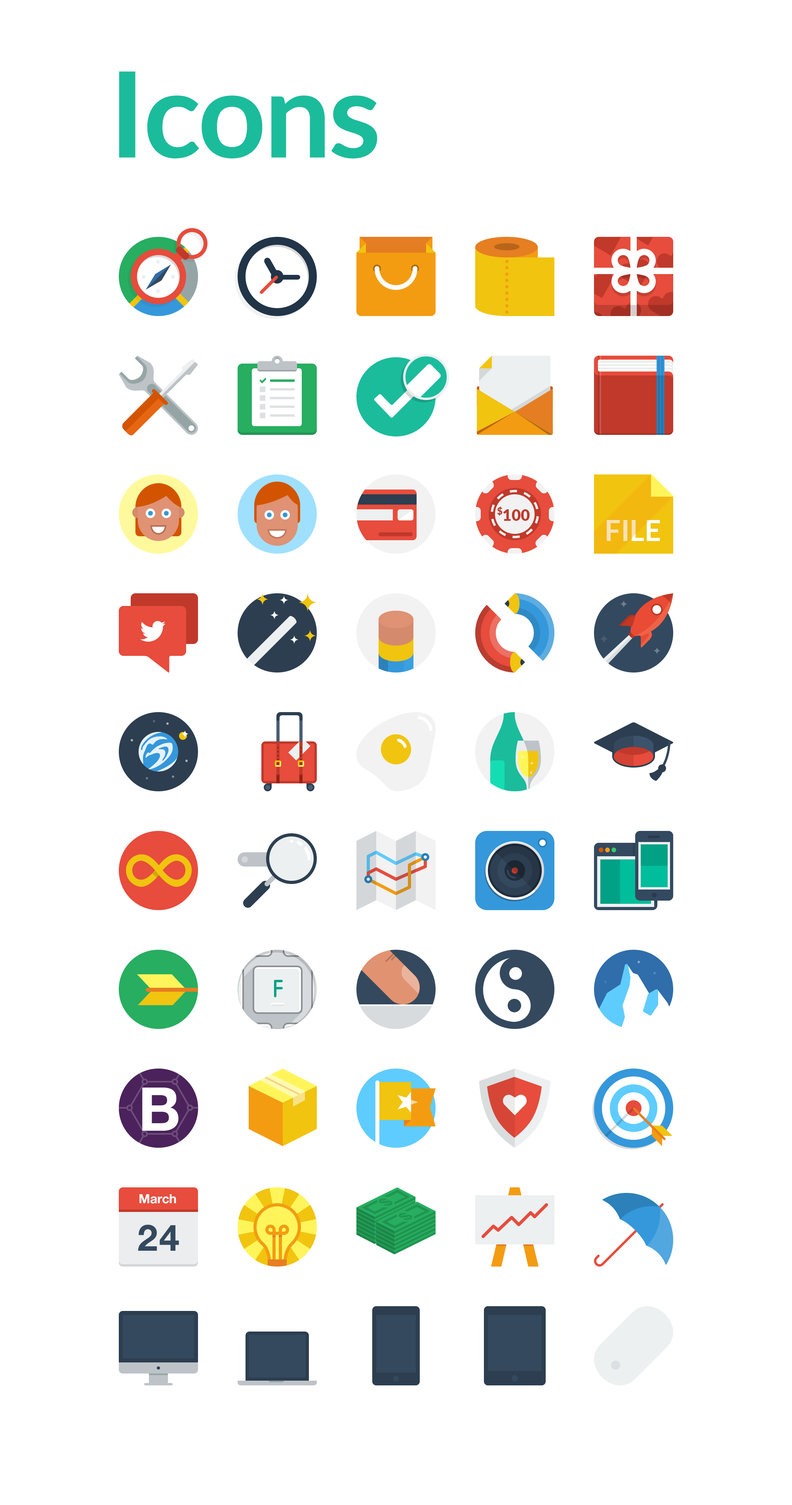
<style>
.page{position:relative;width:792px;height:1505px;background:#ffffff}
.page>*{position:absolute;margin:0}
.t1{font:118.8px "Lato-Bold";letter-spacing:-0.02em;color:#1abc9c}
.t2{font:16px "Lato-Black";color:#c0392b}
.t3{font:28.5px "Lato-Bold"}
.t4{font:60.3px "HelveticaNeue-Bold";letter-spacing:-0.05em;color:#ffffff}
.t5{font:12.7px "HelveticaNeue-Bold";color:#ffffff}
.t6{font:36.4px "HelveticaNeue-Bold";color:#34495e}
</style>
<div class="page">
<p class="t1" style="left:119px;top:71px;width:258px;height:88px">Icons</p>
<p class="t2" style="left:497px;top:507px;width:33px;height:14px">$100</p>
<p class="t3" style="left:607px;top:520px;width:53px;height:21px">FILE</p>
<p class="t4" style="left:142px;top:1088px;width:37px;height:43px">B</p>
<p class="t5" style="left:139px;top:1194px;width:37px;height:10px">March</p>
<p class="t6" style="left:138px;top:1225px;width:41px;height:26px">24</p>
</div>
